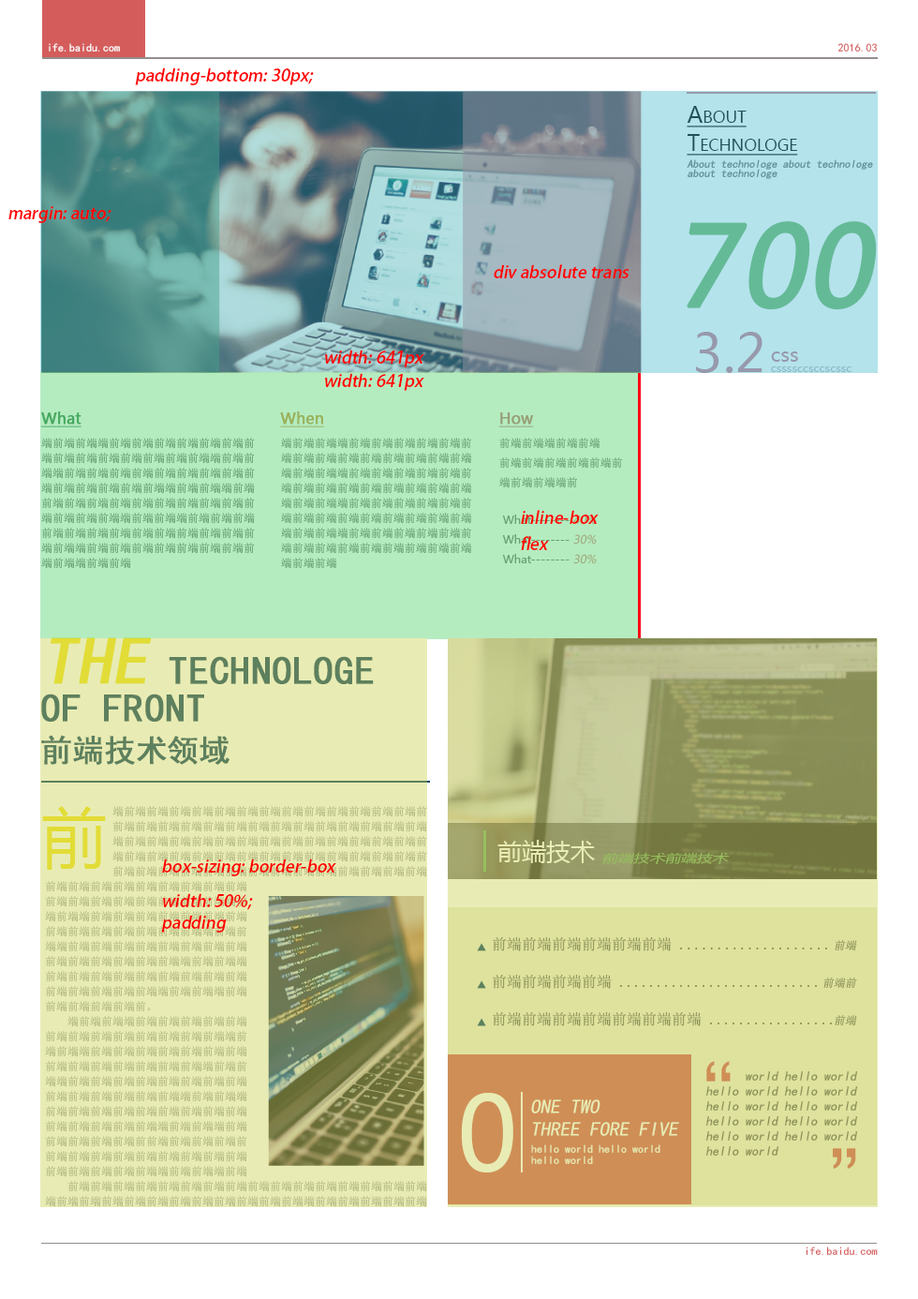
<style>
.page{position:relative;width:918px;height:1299px;background:#ffffff}
.page>*{position:absolute;margin:0}
.t1{font:11.2px "SimHei";color:#ffffff}
.t2{font:11.2px "SimHei";color:#d45d5c}
.t3{font:16.9px "AdobeHeitiStd-Regular";color:#ff0000;font-style:italic}
.t4{font:22.5px/28.1px "MicrosoftYaHei";color:#234f58;font-variant:small-caps;text-decoration:underline}
.t5{font:11.2px/9.4px "KaiTi";color:#5c8b94;font-style:italic}
.t6{font:108.7px "MicrosoftYaHei";color:#64ba96;font-weight:bold;font-style:italic}
.t7{font:51.5px "MicrosoftYaHei";color:#9799ac}
.t8{font:19.7px "MicrosoftYaHei";color:#9799ac}
.t9{font:11.2px "MicrosoftYaHei";color:#8dbbc4}
.t10{font:15px "MicrosoftYaHei";color:#46a960;font-weight:bold;text-decoration:underline}
.t11{font:15px "MicrosoftYaHei";color:#9ab15a;font-weight:bold;text-decoration:underline}
.t12{font:15px "MicrosoftYaHei";color:#979d76;font-weight:bold;text-decoration:underline}
.t13{font:11.2px/15px "SimSun"}
.t14{font:11.2px/19.7px "SimSun"}
.t15{font:11.2px/19.7px "MicrosoftYaHei";color:#69a073}
.t16{font:11.2px/19.7px "MicrosoftYaHei";color:#69a073;font-style:italic}
.t17{font:39.4px/37.5px "SimHei";font-weight:bold}
.t18{font:67.5px/36.9px "SimHei";font-weight:bold;font-style:italic}
.t19{font:30.9px "SimHei";color:#5d805e;font-weight:bold}
.t20{font:65.6px "MicrosoftYaHei";color:#f5e327}
.t21{font:24.4px "MicrosoftYaHei";color:#e8ecb4}
.t22{font:11.2px "MicrosoftYaHei";color:#96bf5e;font-style:italic;scale:1.4 1}
.t23{font:15px/18.7px "SimSun";color:#888d55}
.t24{font:11.2px/18.7px "SimSun";font-style:italic}
.t25{font:67.5px "SimHei";color:#cf8e56}
.t26{font:13.1px/15px "SimHei";color:#888d55;font-style:italic}
.t27{font:103.1px "MicrosoftYaHei";color:#e8ecb4}
.t28{font:19.7px/22.5px "SimHei";color:#e8ecb4;font-style:italic}
.t29{font:11.2px/5.6px "SimHei";color:#e8ecb4}
</style>
<div class="page">
<p class="t1" style="left:49px;top:43px;width:71px;height:9px">ife.baidu.com</p>
<p class="t2" style="left:838px;top:43px;width:39px;height:9px">2016.03</p>
<p class="t3" style="left:135px;top:67px;width:179px;height:18px">padding-bottom: 30px;</p>
<p class="t4" style="left:687px;top:106px;width:111px;height:50px">About<br>Technologe</p>
<p class="t5" style="left:687px;top:159px;width:186px;height:20px">About technologe about technologe <br>about technologe</p>
<p class="t3" style="left:8px;top:206px;width:103px;height:17px">margin: auto;</p>
<p class="t6" style="left:687px;top:221px;width:190px;height:89px">700</p>
<p class="t3" style="left:494px;top:264px;width:136px;height:14px">div absolute trans</p>
<p class="t7" style="left:695px;top:332px;width:68px;height:41px">3.2</p>
<p class="t3" style="left:325px;top:349px;width:99px;height:18px">width: 641px</p>
<p class="t8" style="left:771px;top:351px;width:27px;height:11px">css</p>
<p class="t3" style="left:325px;top:373px;width:99px;height:18px">width: 641px</p>
<p class="t9" style="left:771px;top:366px;width:81px;height:6px">cssssccsccscssc</p>
<p class="t10" style="left:41px;top:411px;width:41px;height:16px">What</p>
<p class="t11" style="left:280px;top:411px;width:45px;height:16px">When</p>
<p class="t12" style="left:498px;top:412px;width:36px;height:15px">How</p>
<p class="t13" style="left:41px;top:438px;width:214px;height:131px">端前端前端端前端前端前端前端前端前端前<br>端前端前端前端前端前端前端前端端前端前<br>端端前端前端前端前端前端前端前端前端前<br>端前端前端前端前端前端端前端前端端前端<br>前端前端前端前端前端前端前端前端前端前<br>端前端前端前端端前端前端端前端前端前端<br>前端前端前端前端前端前端前端前端前端前<br>端前端端前端前端前端前端前端前端前端前<br>端前端端前端前端</p>
<p class="t13" style="left:281px;top:438px;width:191px;height:131px">端前端前端端前端前端前端前端前端前<br>端前端前端前端前端前端前端前端前端<br>端前端前端端前端前端前端前端前端前<br>端前端前端前端前端前端前端前端前端<br>端前端前端端前端前端前端前端前端前<br>端前端前端前端前端前端前端前端前端<br>端前端前端端前端前端前端前端前端前<br>端前端前端前端前端前端前端前端前端<br>端前端前端</p>
<p class="t14" style="left:499px;top:438px;width:123px;height:50px">前端前端端前端前端<br>前端前端前端前端前端前<br>端前端前端端前</p>
<p class="t3" style="left:521px;top:510px;width:78px;height:14px">inline-box</p>
<p class="t15" style="left:502px;top:514px;width:95px;height:50px">What-------- <span class="t16">40%<br></span>What-------- <span class="t16">30%<br></span>What-------- <span class="t16">30%</span></p>
<p class="t3" style="left:521px;top:536px;width:28px;height:14px">flex</p>
<p class="t17" style="left:41px;top:637px;width:333px;height:84px"><span class="t18">THE </span>TECHNOLOGE<br>OF FRONT</p>
<p class="t19" style="left:41px;top:735px;width:189px;height:30px">前端技术领域</p>
<p class="t20" style="left:42px;top:806px;width:64px;height:64px">前</p>
<p class="t21" style="left:498px;top:840px;width:97px;height:23px">前端技术</p>
<p class="t22" style="left:602px;top:852px;width:128px;height:12px">前端技术前端技术</p>
<p class="t3" style="left:162px;top:858px;width:174px;height:18px">box-sizing: border-box</p>
<p class="t3" style="left:163px;top:893px;width:90px;height:17px">width: 50%;</p>
<p class="t3" style="left:161px;top:914px;width:66px;height:18px">padding</p>
<p class="t23" style="left:493px;top:936px;width:339px;height:90px">前端前端前端前端前端前端 ....................<br><br>前端前端前端前端 ...........................<br><br>前端前端前端前端前端前端前端 .................</p>
<p class="t24" style="left:824px;top:940px;width:33px;height:86px;text-align:right">前端<br><br>前端前<br><br>前端</p>
<p class="t25" style="left:706px;top:1061px;width:10px;height:20px">‘</p>
<p class="t25" style="left:721px;top:1061px;width:10px;height:20px">‘</p>
<p class="t26" style="left:706px;top:1071px;width:152px;height:84px">world hello world<br>hello world hello world<br>hello world hello world<br>hello world hello world<br>hello world hello world<br>hello world</p>
<p class="t27" style="left:461px;top:1092px;width:52px;height:80px">0</p>
<p class="t28" style="left:531px;top:1099px;width:148px;height:37px">ONE TWO <br>THREE FORE FIVE</p>
<p class="t29" style="left:531px;top:1144px;width:130px;height:20px">hello world hello world <br><br>hello world</p>
<p class="t25" style="left:833px;top:1148px;width:9px;height:20px">’</p>
<p class="t25" style="left:847px;top:1148px;width:9px;height:20px">’</p>
<p class="t2" style="left:806px;top:1246px;width:72px;height:9px">ife.baidu.com</p>
</div>
